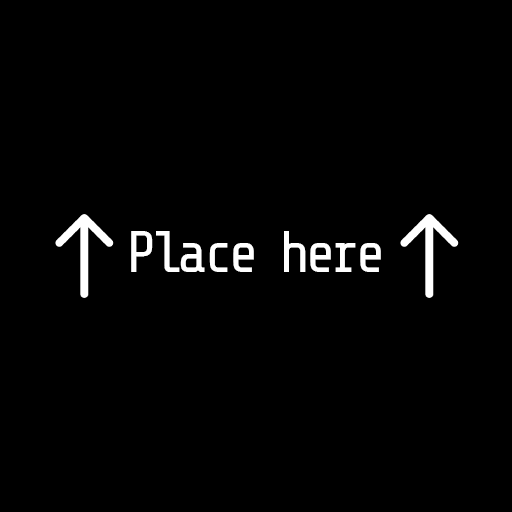
<style>
.page{position:relative;width:512px;height:512px;background:#000000}
.page>*{position:absolute;margin:0}
.t1{font:57.9px "ShareTechMono-Regular";letter-spacing:-0.1em;color:#ffffff}
</style>
<div class="page">
<p class="t1" style="left:131px;top:231px;width:250px;height:41px">Place here</p>
</div>
